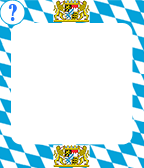
<style>
.page{position:relative;width:144px;height:168px;background:#ffffff}
.page>*{position:absolute;margin:0}
.t1{font:21.2px "BernardMT-Condensed";color:#2572ff}
</style>
<div class="page">
<p class="t1" style="left:8px;top:4px;width:9px;height:17px">?</p>
</div>
